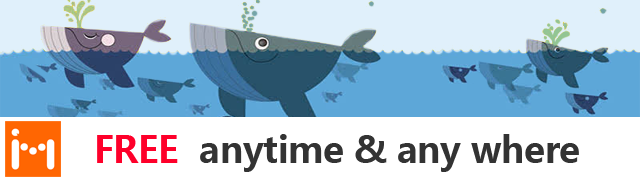
<style>
.page{position:relative;width:640px;height:180px;background:#ffffff}
.page>*{position:absolute;margin:0}
.t1{font:36px "MicrosoftYaHei";letter-spacing:-0.01em;color:#333333}
.t2{font:36px "MicrosoftYaHei";letter-spacing:-0.01em;color:#fe002a}
</style>
<div class="page">
<p class="t1" style="left:97px;top:134px;width:482px;height:38px"><span class="t2">FREE</span>  anytime &amp; any where</p>
</div>
